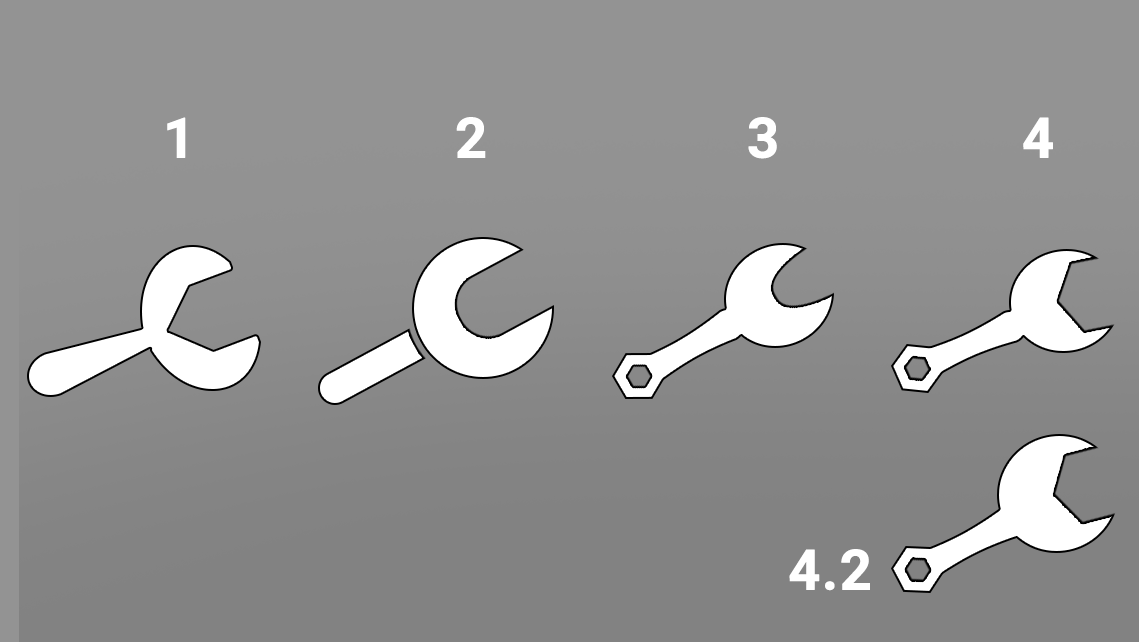
<style>
.page{position:relative;width:1139px;height:642px;background:#939393}
.page>*{position:absolute;margin:0}
.t1{font:56px "Roboto-Bold";color:#ffffff;font-weight:bold}
</style>
<div class="page">
<p class="t1" style="left:167px;top:117px;width:19px;height:41px">1</p>
<p class="t1" style="left:456px;top:117px;width:30px;height:41px">2</p>
<p class="t1" style="left:748px;top:117px;width:29px;height:42px">3</p>
<p class="t1" style="left:1023px;top:117px;width:30px;height:41px">4</p>
<p class="t1" style="left:789px;top:549px;width:81px;height:42px">4.2</p>
</div>
